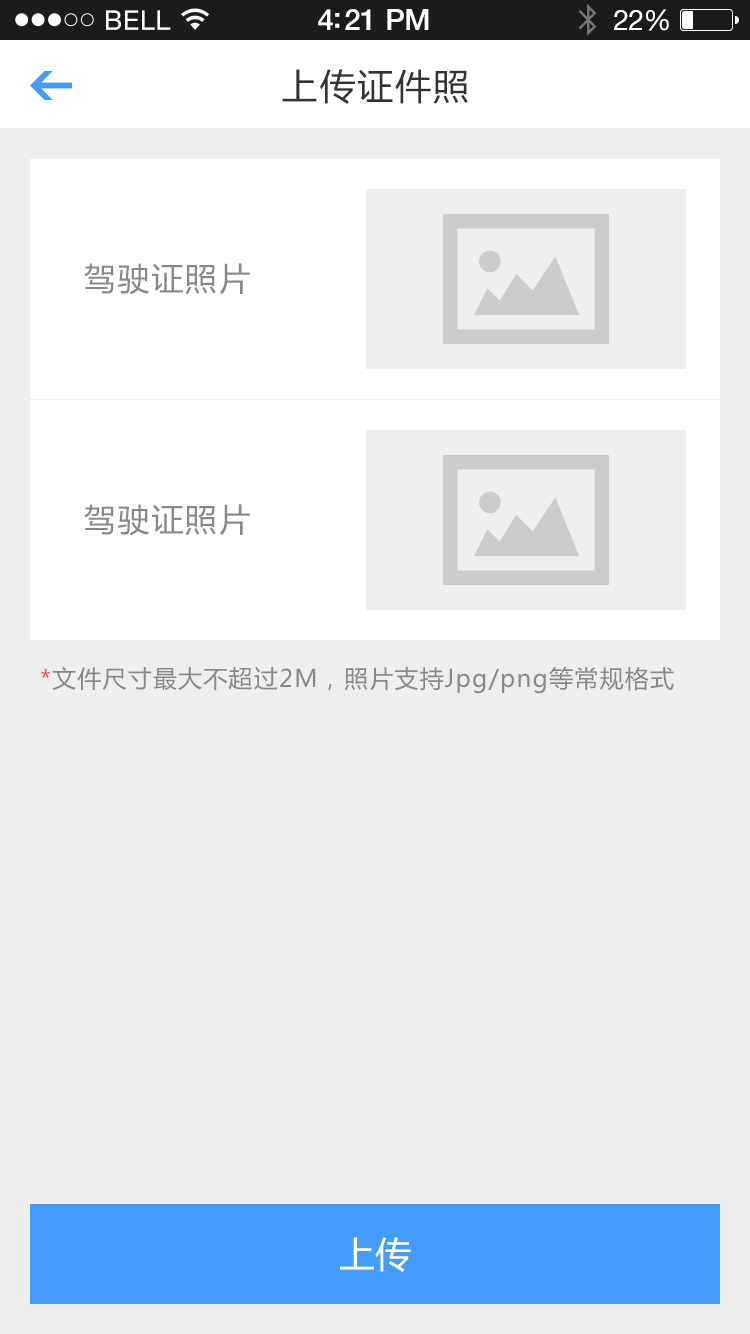
<style>
.page{position:relative;width:750px;height:1334px;background:#eeeeee}
.page>*{position:absolute;margin:0}
.t1{font:36px "MicrosoftYaHei";letter-spacing:0.05em;color:#333333}
.t2{font:32px "MicrosoftYaHei";letter-spacing:0.05em;color:#888888}
.t3{font:24px "MicrosoftYaHei";letter-spacing:0.05em;color:#888888}
.t4{font:24px "MicrosoftYaHei";letter-spacing:0.05em;color:#fe4750}
.t5{font:36px "MicrosoftYaHei";color:#ffffff}
</style>
<div class="page">
<p class="t1" style="left:282px;top:69px;width:186px;height:35px">上传证件照</p>
<p class="t2" style="left:84px;top:263px;width:166px;height:32px">驾驶证照片</p>
<p class="t2" style="left:84px;top:504px;width:166px;height:32px">驾驶证照片</p>
<p class="t3" style="left:41px;top:666px;width:633px;height:28px"><span class="t4">*</span>文件尺寸最大不超过2M，照片支持Jpg/png等常规格式</p>
<p class="t5" style="left:340px;top:1237px;width:71px;height:35px">上传</p>
</div>
